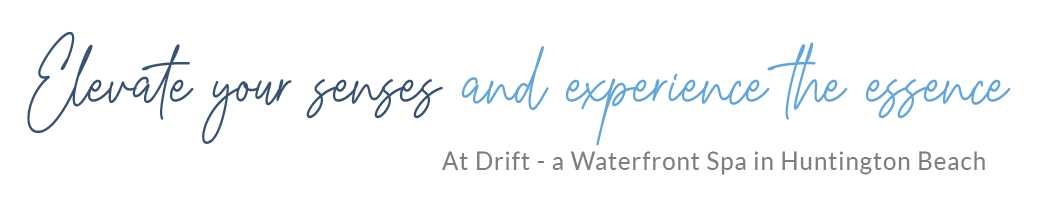
<style>
.page{position:relative;width:1038px;height:217px;background:#ffffff}
.page>*{position:absolute;margin:0}
.t1{font:110px "GrayscaleSignatureRegular";color:#62a5da;scale:0.9 1}
.t2{font:110px "GrayscaleSignatureRegular";color:#375173;scale:0.9 1}
.t3{font:45px "Lato-Regular";letter-spacing:0.05em;color:#7d7e7f;scale:0.9 1}
</style>
<div class="page">
<p class="t1" style="left:27px;top:31px;width:984px;height:115px"><span class="t2">Elevate your senses </span>and experience the essence</p>
<p class="t3" style="left:442px;top:151px;width:543px;height:24px">At Drift - a Waterfront Spa in Huntington Beach</p>
</div>
